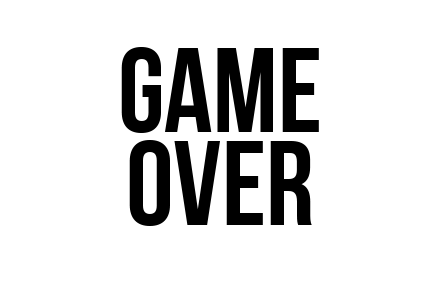
<style>
.page{position:relative;width:432px;height:288px;background:#ffffff}
.page>*{position:absolute;margin:0}
.t1{font:120px "BebasNeue";color:#000000}
</style>
<div class="page">
<p class="t1" style="left:121px;top:47px;width:198px;height:86px">GAME</p>
<p class="t1" style="left:129px;top:140px;width:183px;height:86px">over</p>
</div>
